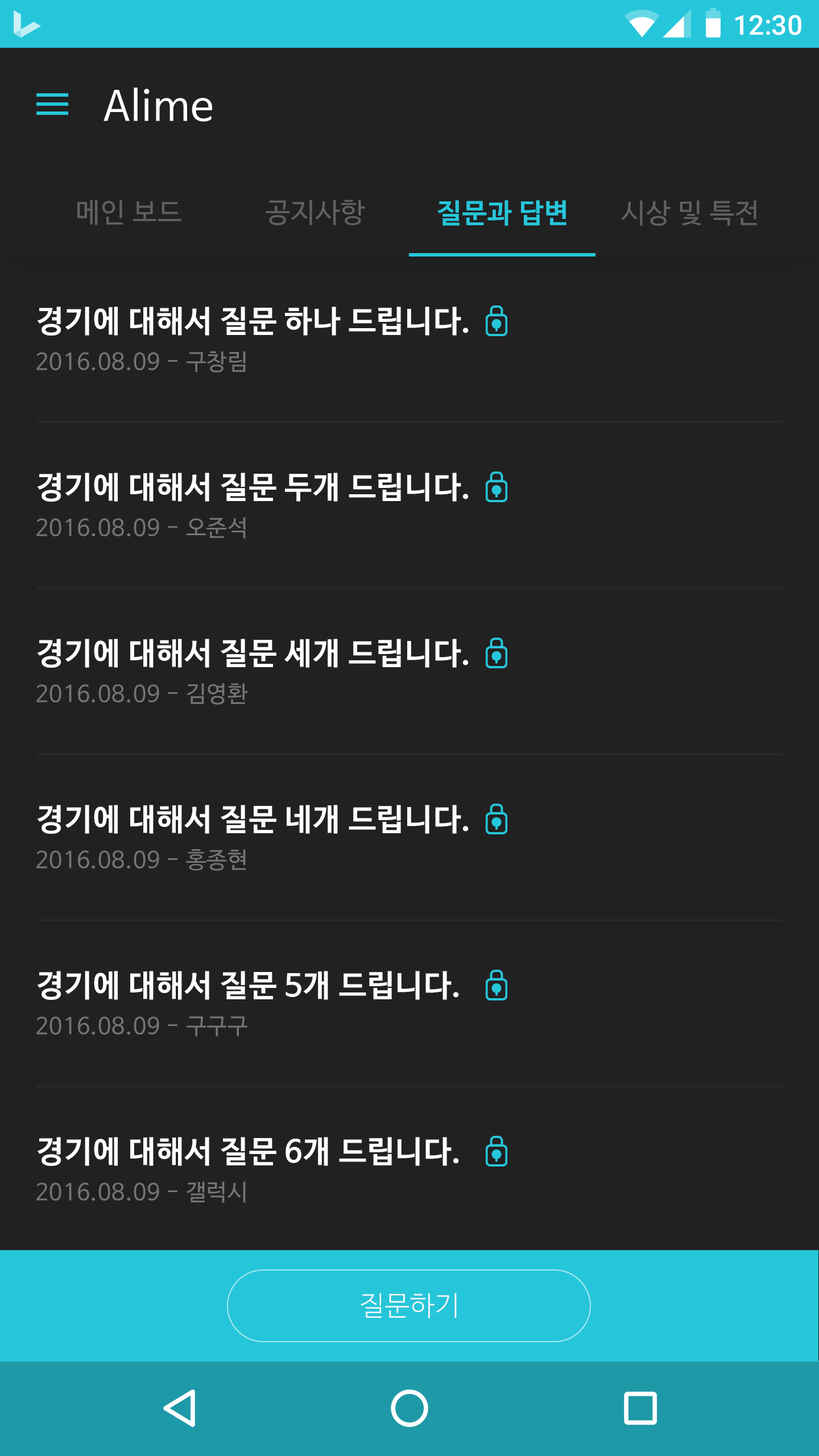
<style>
.page{position:relative;width:819px;height:1456px;background:#212121}
.page>*{position:absolute;margin:0}
.t1{font:27.3px "Roboto-Medium";color:#ffffff}
.t2{font:40.9px "NanumBarunGothic";letter-spacing:0.025em;color:#ffffff}
.t3{font:27.3px "NanumBarunGothic";letter-spacing:0.025em;color:#616161}
.t4{font:27.3px "NanumBarunGothicBold";letter-spacing:0.025em;color:#26c6da}
.t5{font:30.7px "NanumBarunGothicBold";letter-spacing:0.025em;color:#ffffff}
.t6{font:22.7px "NanumBarunGothic";letter-spacing:0.025em;color:#757575}
.t7{font:27.3px "NanumBarunGothicLight";letter-spacing:0.025em;color:#fafafa}
</style>
<div class="page">
<p class="t1" style="left:735px;top:15px;width:66px;height:20px">12:30</p>
<p class="t2" style="left:104px;top:88px;width:108px;height:34px">Alime</p>
<p class="t3" style="left:77px;top:200px;width:104px;height:25px">메인 보드</p>
<p class="t3" style="left:266px;top:200px;width:99px;height:25px">공지사항</p>
<p class="t4" style="left:437px;top:200px;width:129px;height:26px">질문과 답변</p>
<p class="t3" style="left:621px;top:200px;width:136px;height:26px">시상 및 특전</p>
<p class="t5" style="left:37px;top:307px;width:432px;height:29px">경기에 대해서 질문 하나 드립니다.</p>
<p class="t6" style="left:36px;top:351px;width:210px;height:22px">2016.08.09 - 구창림</p>
<p class="t5" style="left:37px;top:473px;width:432px;height:29px">경기에 대해서 질문 두개 드립니다.</p>
<p class="t6" style="left:36px;top:517px;width:210px;height:22px">2016.08.09 - 오준석</p>
<p class="t5" style="left:37px;top:639px;width:432px;height:29px">경기에 대해서 질문 세개 드립니다.</p>
<p class="t6" style="left:36px;top:683px;width:212px;height:22px">2016.08.09 - 김영환</p>
<p class="t5" style="left:37px;top:805px;width:432px;height:29px">경기에 대해서 질문 네개 드립니다.</p>
<p class="t6" style="left:36px;top:849px;width:210px;height:22px">2016.08.09 - 홍종현</p>
<p class="t5" style="left:37px;top:971px;width:422px;height:29px">경기에 대해서 질문 5개 드립니다.</p>
<p class="t6" style="left:36px;top:1016px;width:211px;height:20px">2016.08.09 - 구구구</p>
<p class="t5" style="left:37px;top:1137px;width:422px;height:29px">경기에 대해서 질문 6개 드립니다.</p>
<p class="t6" style="left:36px;top:1181px;width:210px;height:22px">2016.08.09 - 갤럭시</p>
<p class="t7" style="left:361px;top:1293px;width:96px;height:25px">질문하기</p>
</div>
